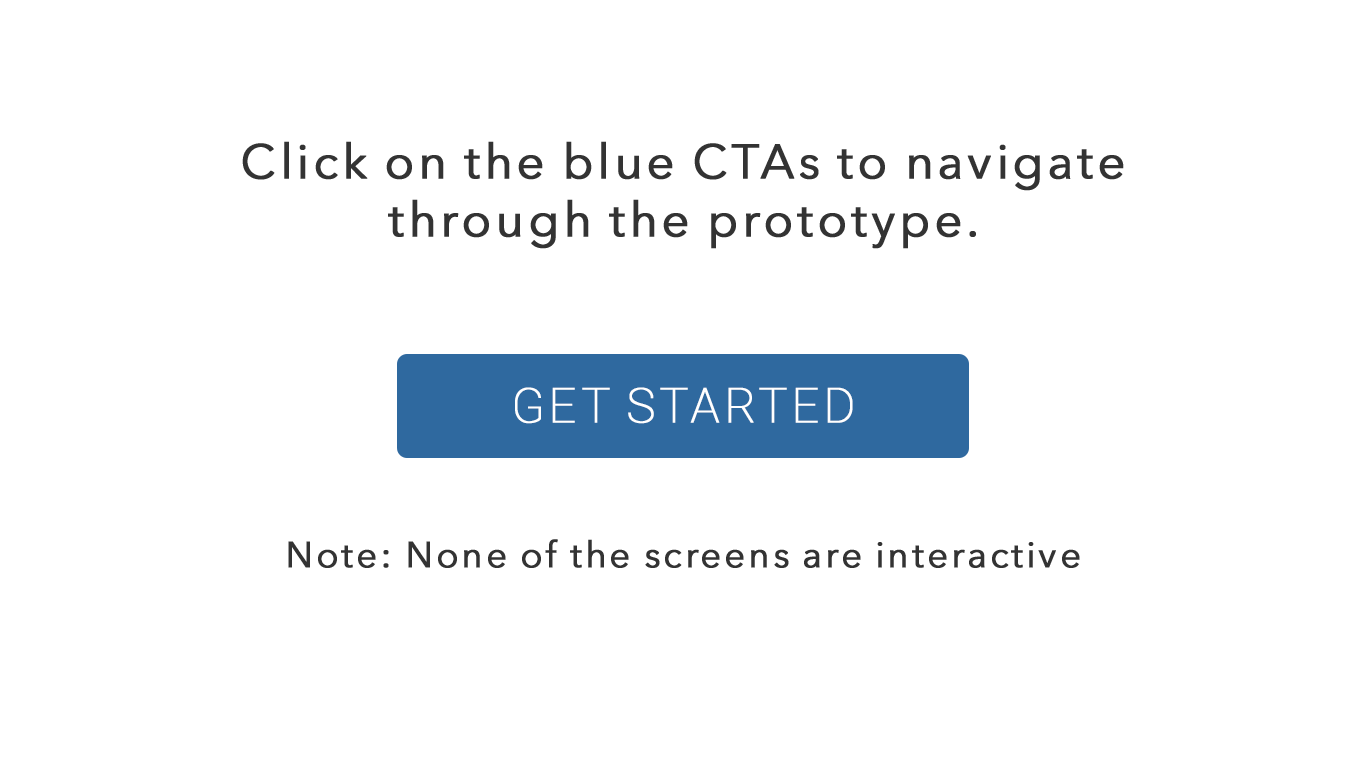
<style>
.page{position:relative;width:1366px;height:768px;background:#ffffff}
.page>*{position:absolute;margin:0}
.t1{font:48px "AvenirNext-Regular";letter-spacing:0.07em;color:#333333;font-weight:bold}
.t2{font:36px "AvenirNext-Regular";letter-spacing:0.07em;color:#333333;font-weight:bold}
.t3{font:48px "Roboto-Thin";letter-spacing:0.07em;color:#ffffff;text-transform:uppercase;font-weight:bold}
</style>
<div class="page">
<p class="t1" style="left:242px;top:141px;width:882px;height:427px;text-align:center">Click on the blue CTAs to navigate through the prototype.<br><br><br><br><br><br><span class="t2">Note: None of the screens are interactive</span></p>
<p class="t3" style="left:515px;top:387px;width:338px;height:37px">Get Started</p>
</div>
